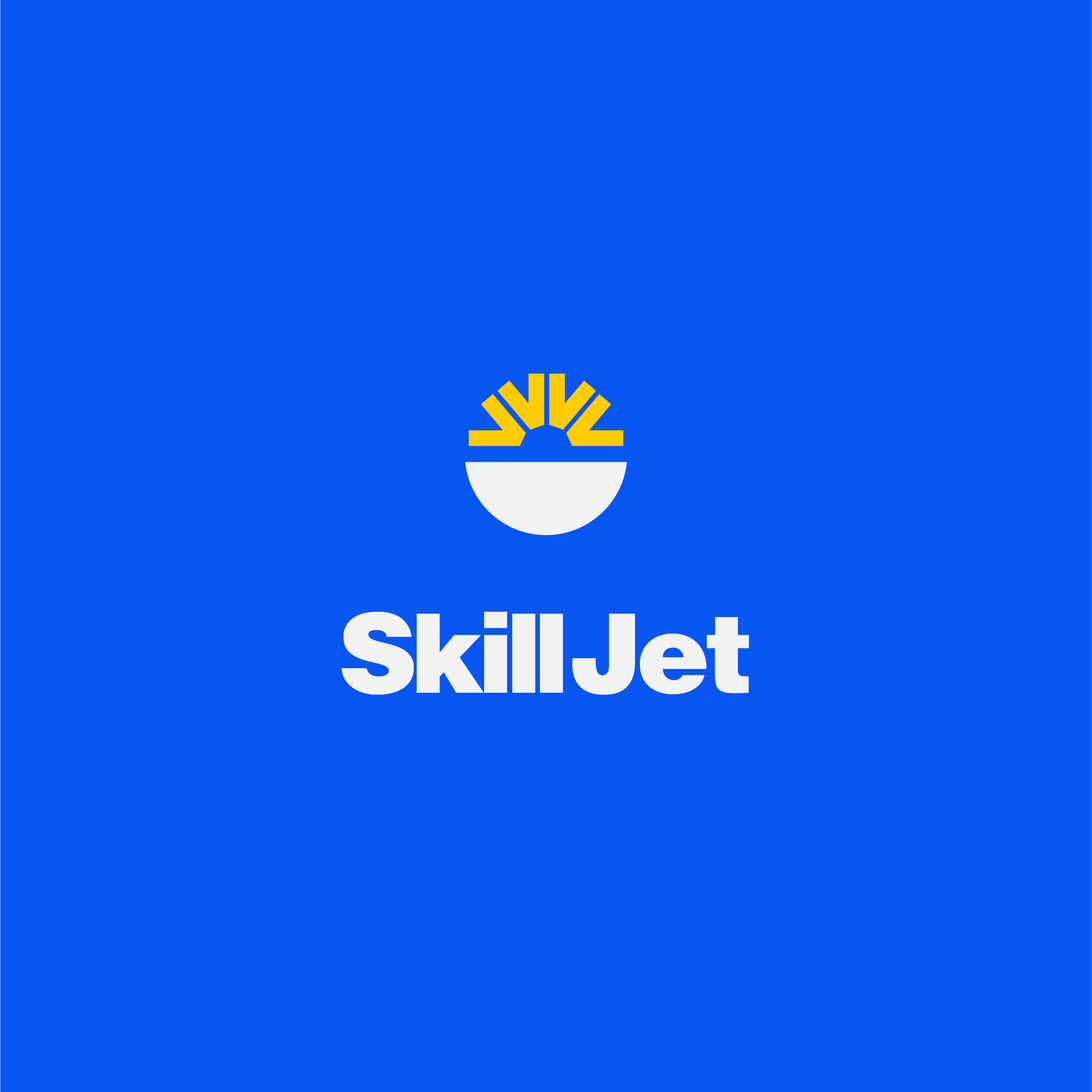
<style>
.page{position:relative;width:1092px;height:1092px;background:#0756f1}
.page>*{position:absolute;margin:0}
.t1{font:109.9px "Helvetica-Black";color:#f2f2f2}
</style>
<div class="page">
<p class="t1" style="left:342px;top:611px;width:407px;height:84px">SkillJet</p>
</div>
